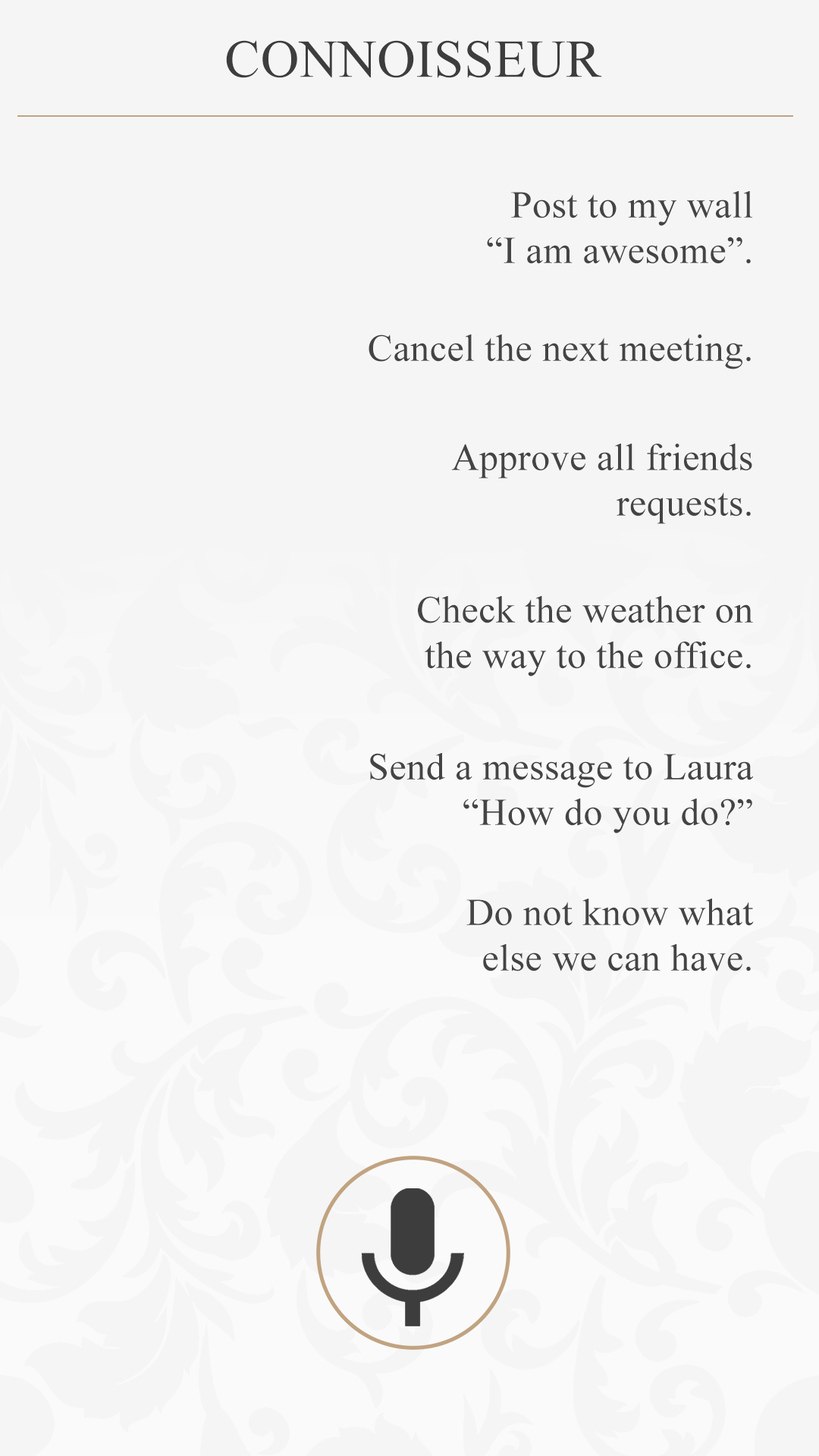
<style>
.page{position:relative;width:819px;height:1456px;background:#f5f5f5}
.page>*{position:absolute;margin:0}
.t1{font:53.1px "TimesNewRomanPSMT";letter-spacing:0.01em;color:#3d3d3d;text-transform:uppercase}
.t2{font:37.9px "TimesNewRomanPSMT";letter-spacing:0.01em;color:#444444}
</style>
<div class="page">
<p class="t1" style="left:226px;top:40px;width:376px;height:38px">Connoisseur</p>
<p class="t2" style="left:487px;top:191px;width:265px;height:73px;text-align:right">Post to my wall<br>“I am awesome”.</p>
<p class="t2" style="left:369px;top:334px;width:382px;height:35px">Cancel the next meeting.</p>
<p class="t2" style="left:451px;top:444px;width:301px;height:80px;text-align:right">Approve all friends<br>requests.</p>
<p class="t2" style="left:418px;top:596px;width:335px;height:80px;text-align:right">Check the weather on<br>the way to the office.</p>
<p class="t2" style="left:370px;top:753px;width:383px;height:80px;text-align:right">Send a message to Laura<br>“How do you do?”</p>
<p class="t2" style="left:466px;top:899px;width:288px;height:72px;text-align:right">Do not know what<br>else we can have.</p>
</div>
